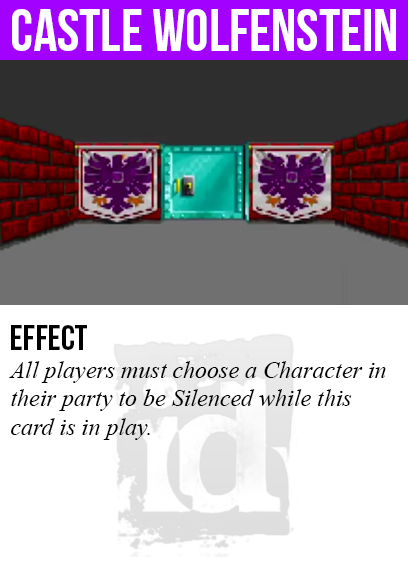
<style>
.page{position:relative;width:408px;height:585px;background:#ffffff}
.page>*{position:absolute;margin:0}
.t1{font:60px "BebasNeue";color:#ffffff}
.t2{font:36px "BebasNeue";color:#000000}
.t3{font:24px "TimesNewRomanPS-ItalicMT";color:#000000}
</style>
<div class="page">
<p class="t1" style="left:12px;top:9px;width:384px;height:42px">Castle wolfenstein</p>
<p class="t2" style="left:11px;top:325px;width:76px;height:25px">Effect</p>
<p class="t3" style="left:9px;top:361px;width:377px;height:79px">All players must choose a Character in<br>their party to be Silenced while this<br>card is in play.</p>
</div>
